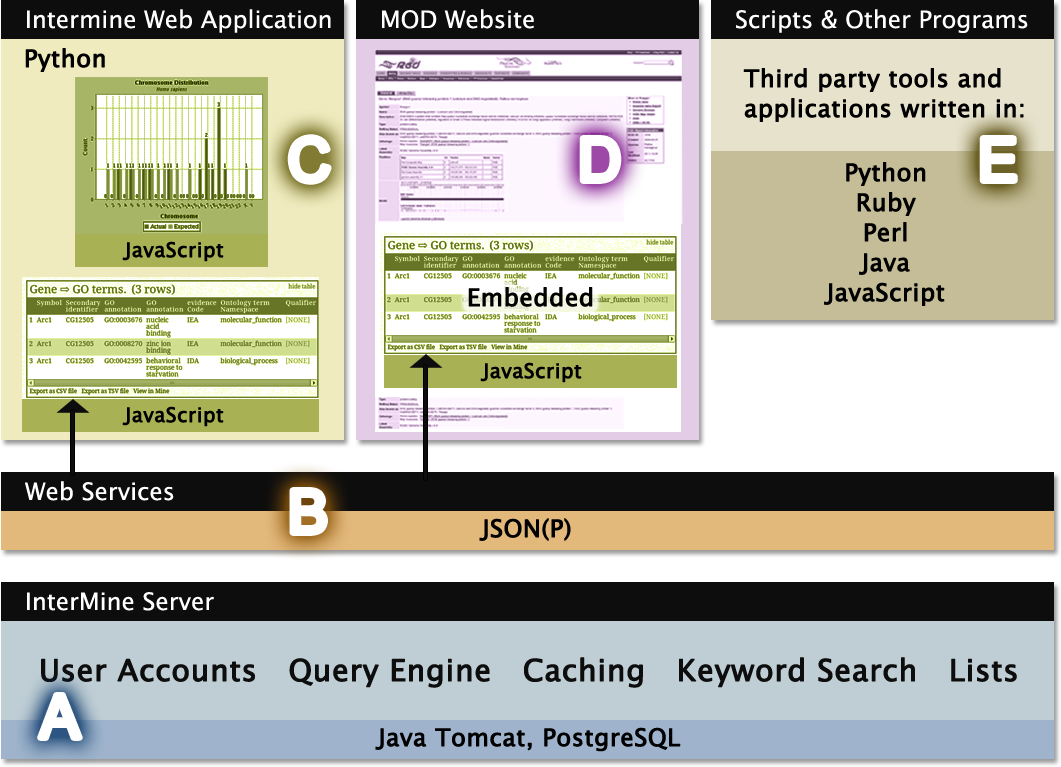
<style>
.page{position:relative;width:1061px;height:767px}
.page>*{position:absolute;margin:0}
.t1{font:24px "LucidaGrande";color:#ffffff}
.t2{font:24px "LucidaGrande";color:#000000;font-weight:bold}
.t3{font:24px/30px "LucidaGrande";color:#000000;font-weight:bold}
.t4{font:60px "ArialMT";color:#ffffff}
.t5{font:20px "LucidaGrande";color:#000000;font-weight:bold}
.t6{font:30px "LucidaGrande";color:#0d0d0d;font-weight:bold}
</style>
<div class="page">
<p class="t1" style="left:27px;top:9px;width:304px;height:24px">Intermine Web Application</p>
<p class="t1" style="left:382px;top:9px;width:152px;height:20px">MOD Website</p>
<p class="t1" style="left:736px;top:9px;width:292px;height:24px">Scripts &amp; Other Programs</p>
<p class="t2" style="left:25px;top:48px;width:80px;height:24px">Python</p>
<p class="t3" style="left:743px;top:68px;width:281px;height:54px">Third party tools and<br>applications written in:</p>
<p class="t4" style="left:290px;top:137px;width:39px;height:45px">C</p>
<p class="t4" style="left:582px;top:138px;width:37px;height:43px">D</p>
<p class="t4" style="left:982px;top:138px;width:33px;height:43px">E</p>
<p class="t3" style="left:824px;top:162px;width:121px;height:144px;text-align:center">Python<br>Ruby<br>Perl<br>Java<br>JavaScript</p>
<p class="t5" style="left:122px;top:241px;width:102px;height:21px">JavaScript</p>
<p class="t2" style="left:468px;top:287px;width:125px;height:20px">Embedded</p>
<p class="t5" style="left:480px;top:362px;width:102px;height:21px">JavaScript</p>
<p class="t5" style="left:122px;top:406px;width:102px;height:21px">JavaScript</p>
<p class="t1" style="left:25px;top:481px;width:149px;height:20px">Web Services</p>
<p class="t4" style="left:292px;top:490px;width:33px;height:43px">B</p>
<p class="t2" style="left:479px;top:518px;width:92px;height:23px">JSON(P)</p>
<p class="t1" style="left:27px;top:592px;width:187px;height:19px">InterMine Server</p>
<p class="t6" style="left:41px;top:657px;width:976px;height:31px">User Accounts   Query Engine   Caching   Keyword Search   Lists</p>
<p class="t4" style="left:40px;top:695px;width:40px;height:43px">A</p>
<p class="t2" style="left:375px;top:727px;width:306px;height:25px">Java Tomcat, PostgreSQL</p>
</div>
